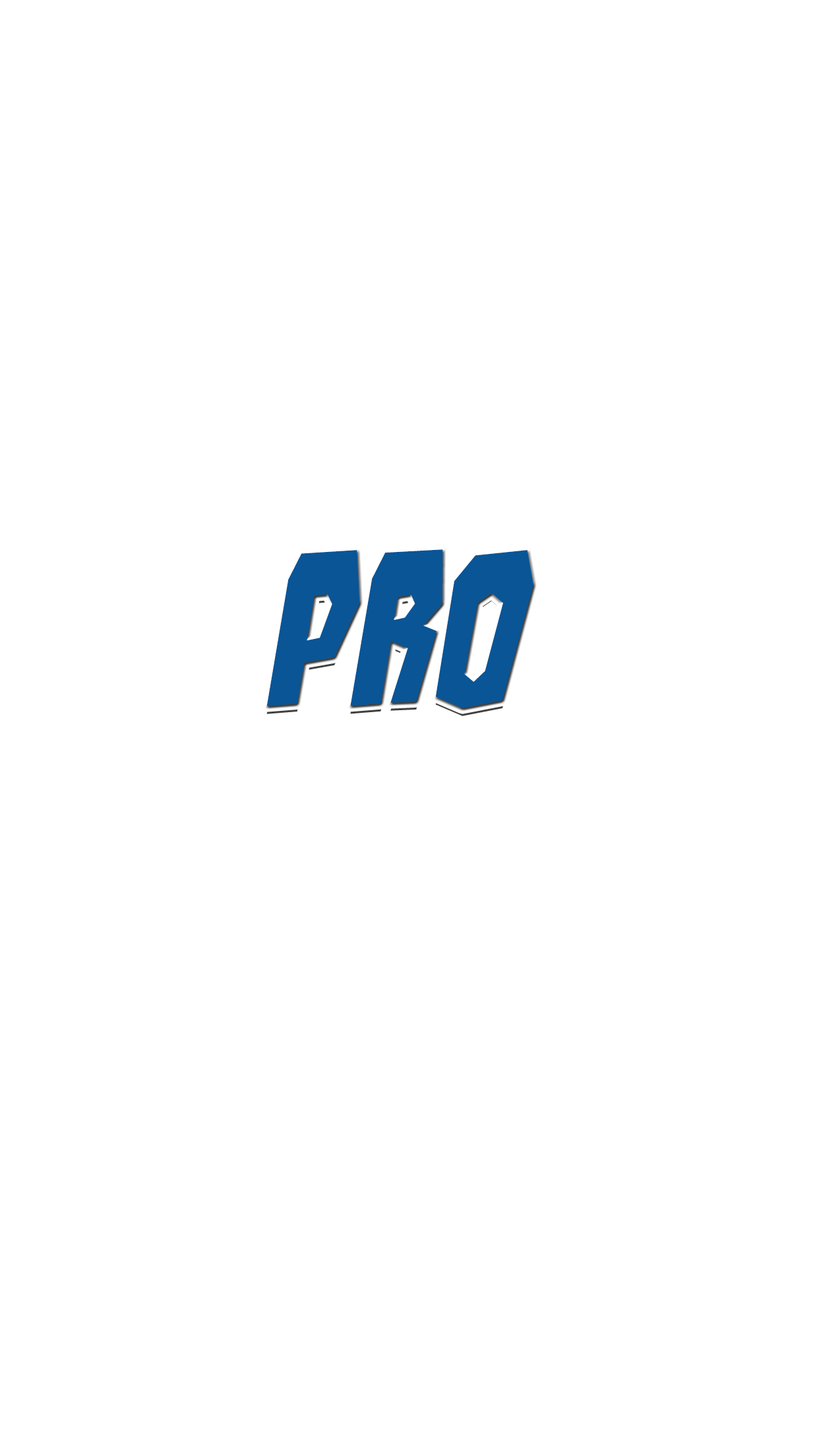
<style>
.page{position:relative;width:819px;height:1456px;background:#ffffff}
.page>*{position:absolute;margin:0}
.t1{font:193px "Kaiju-Monster__G";color:#095596;scale:1.06 1}
</style>
<div class="page">
<p class="t1" style="left:266px;top:549px;width:267px;height:159px">PRO</p>
</div>
